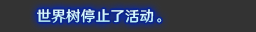
<style>
.page{position:relative;width:256px;height:32px;background:#333333}
.page>*{position:absolute;margin:0}
.t1{font:14.7px "HYWenHei-FEW";letter-spacing:0.005em;color:#d1f8ff}
</style>
<div class="page">
<p class="t1" style="left:37px;top:9px;width:125px;height:14px">世界树停止了活动。</p>
</div>
